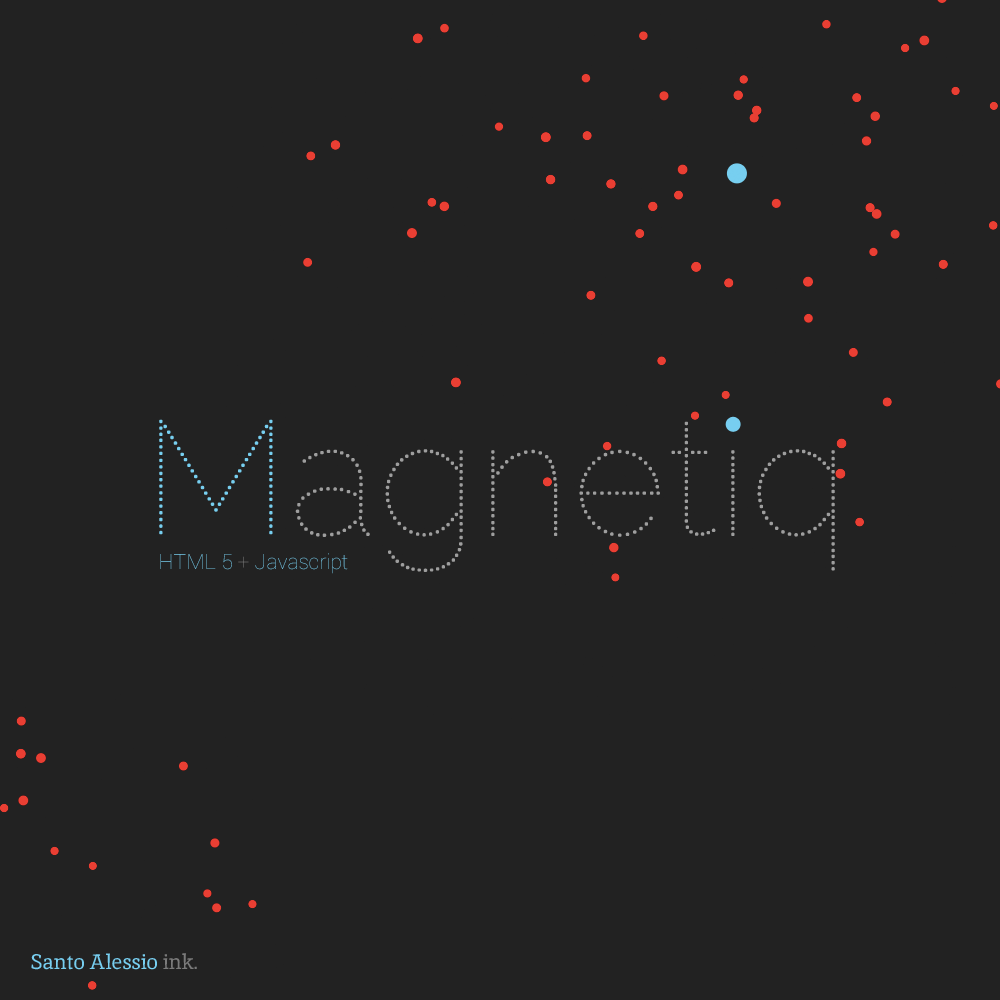
<style>
.page{position:relative;width:1000px;height:1000px;background:#222222}
.page>*{position:absolute;margin:0}
.t1{font:164.8px "RalewayDots-Regular";color:#9e9e9e}
.t2{font:164.8px "RalewayDots-Regular";color:#77cff0}
.t3{font:21px "Roboto-Thin"}
.t4{font:21px "Inika";color:#77cef0}
.t5{font:21px "Inika";color:#7a7a7a}
</style>
<div class="page">
<p class="t1" style="left:159px;top:415px;width:676px;height:157px"><span class="t2">M</span>agnetiq</p>
<p class="t3" style="left:160px;top:553px;width:188px;height:21px">HTML 5 + Javascript</p>
<p class="t4" style="left:31px;top:953px;width:166px;height:17px">Santo Alessio <span class="t5">ink.</span></p>
</div>
